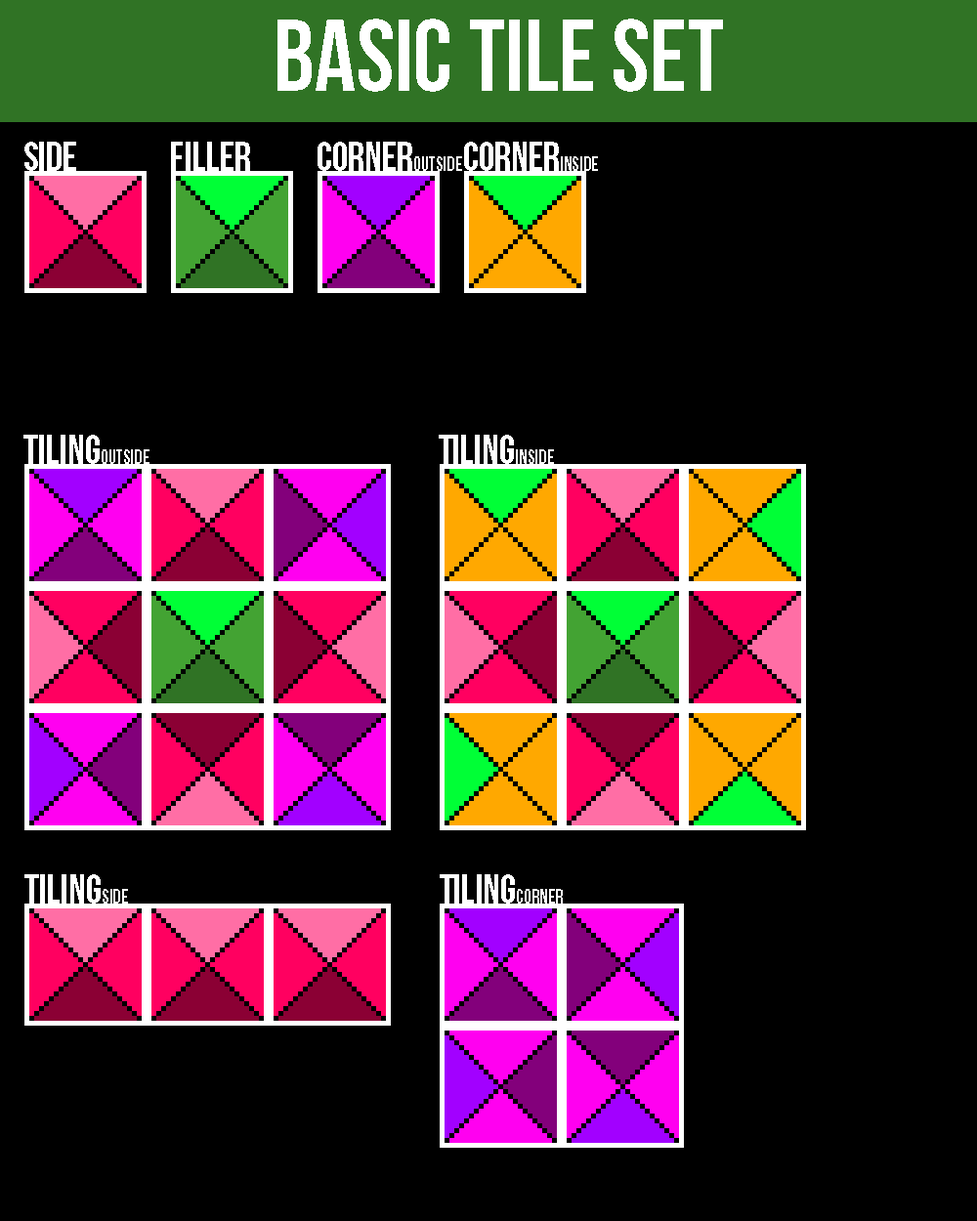
<style>
.page{position:relative;width:977px;height:1221px;background:#000000}
.page>*{position:absolute;margin:0}
.t1{font:101.7px "BebasNeue";color:#ffffff}
.t2{font:40.7px "BebasNeue";color:#ffffff}
.t3{font:20.3px "BebasNeue";color:#ffffff}
</style>
<div class="page">
<p class="t1" style="left:277px;top:19px;width:446px;height:73px">Basic Tile Set</p>
<p class="t2" style="left:24px;top:142px;width:52px;height:29px">Side</p>
<p class="t2" style="left:171px;top:142px;width:79px;height:29px">filler</p>
<p class="t3" style="left:317px;top:142px;width:145px;height:29px"><span class="t2">Corner</span>Outside</p>
<p class="t2" style="left:464px;top:142px;width:134px;height:29px">corner<span class="t3">inside</span></p>
<p class="t3" style="left:23px;top:435px;width:126px;height:29px"><span class="t2">tiling</span>outside</p>
<p class="t2" style="left:439px;top:435px;width:115px;height:29px">Tiling<span class="t3">inside</span></p>
<p class="t2" style="left:24px;top:874px;width:104px;height:29px">Tiling<span class="t3">side</span></p>
<p class="t2" style="left:440px;top:874px;width:123px;height:29px">Tiling<span class="t3">Corner</span></p>
</div>
